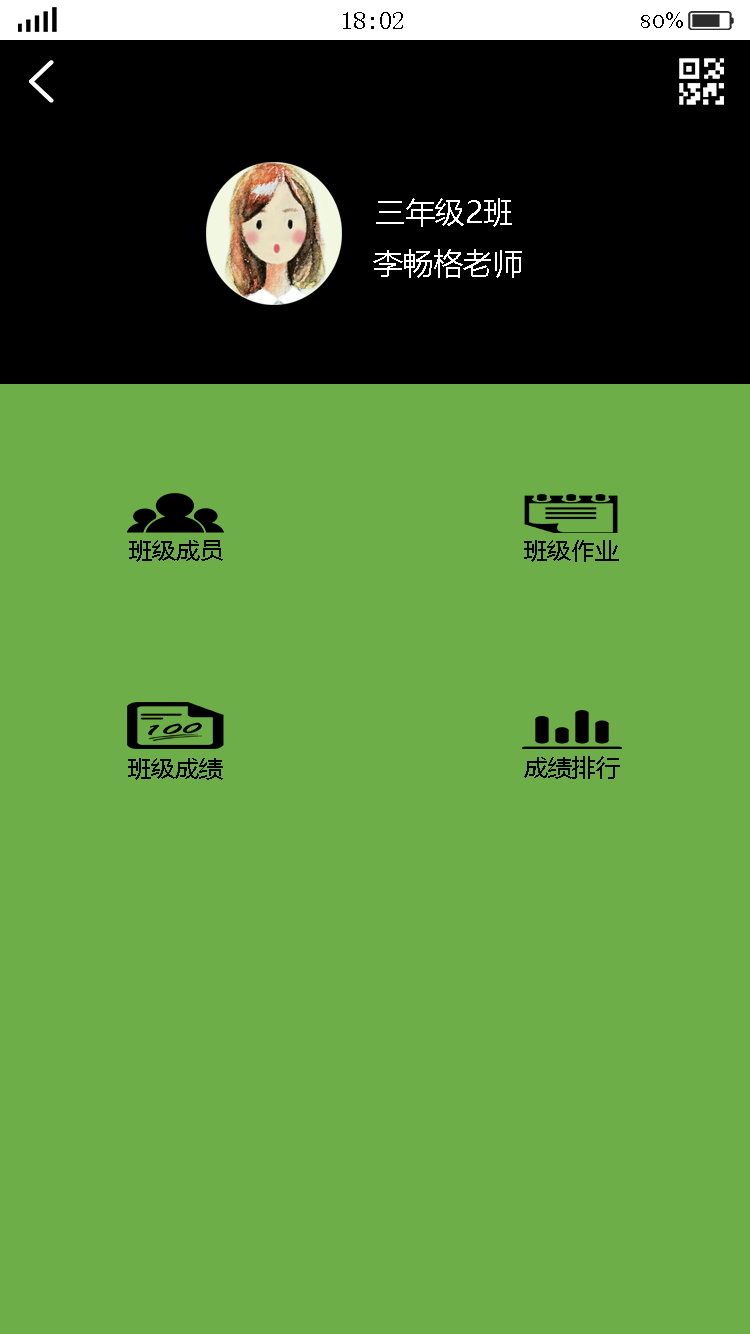
<style>
.page{position:relative;width:750px;height:1334px;background:#6dae49}
.page>*{position:absolute;margin:0}
.t1{font:25px "SimSun";color:#000000}
.t2{font:25px "BellMT";color:#000000}
.t3{font:30px "MicrosoftYaHei";color:#ffffff}
.t4{font:24px "MicrosoftYaHei";color:#000000}
</style>
<div class="page">
<p class="t1" style="left:343px;top:12px;width:60px;height:17px">18:02</p>
<p class="t2" style="left:641px;top:12px;width:42px;height:16px">80%</p>
<p class="t3" style="left:376px;top:198px;width:136px;height:29px">三年级2班</p>
<p class="t3" style="left:373px;top:249px;width:149px;height:29px">李畅格老师</p>
<p class="t4" style="left:129px;top:540px;width:94px;height:22px">班级成员</p>
<p class="t4" style="left:524px;top:540px;width:95px;height:22px">班级作业</p>
<p class="t4" style="left:128px;top:758px;width:95px;height:22px">班级成绩</p>
<p class="t4" style="left:524px;top:756px;width:96px;height:23px">成绩排行</p>
</div>
